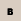
<style>
.page{position:relative;width:21px;height:21px;background:#d9cdc1}
.page>*{position:absolute;margin:0}
.t1{font:9px "Tahoma-Bold";color:#000000}
</style>
<div class="page">
<p class="t1" style="left:7px;top:8px;width:6px;height:7px">B</p>
</div>
